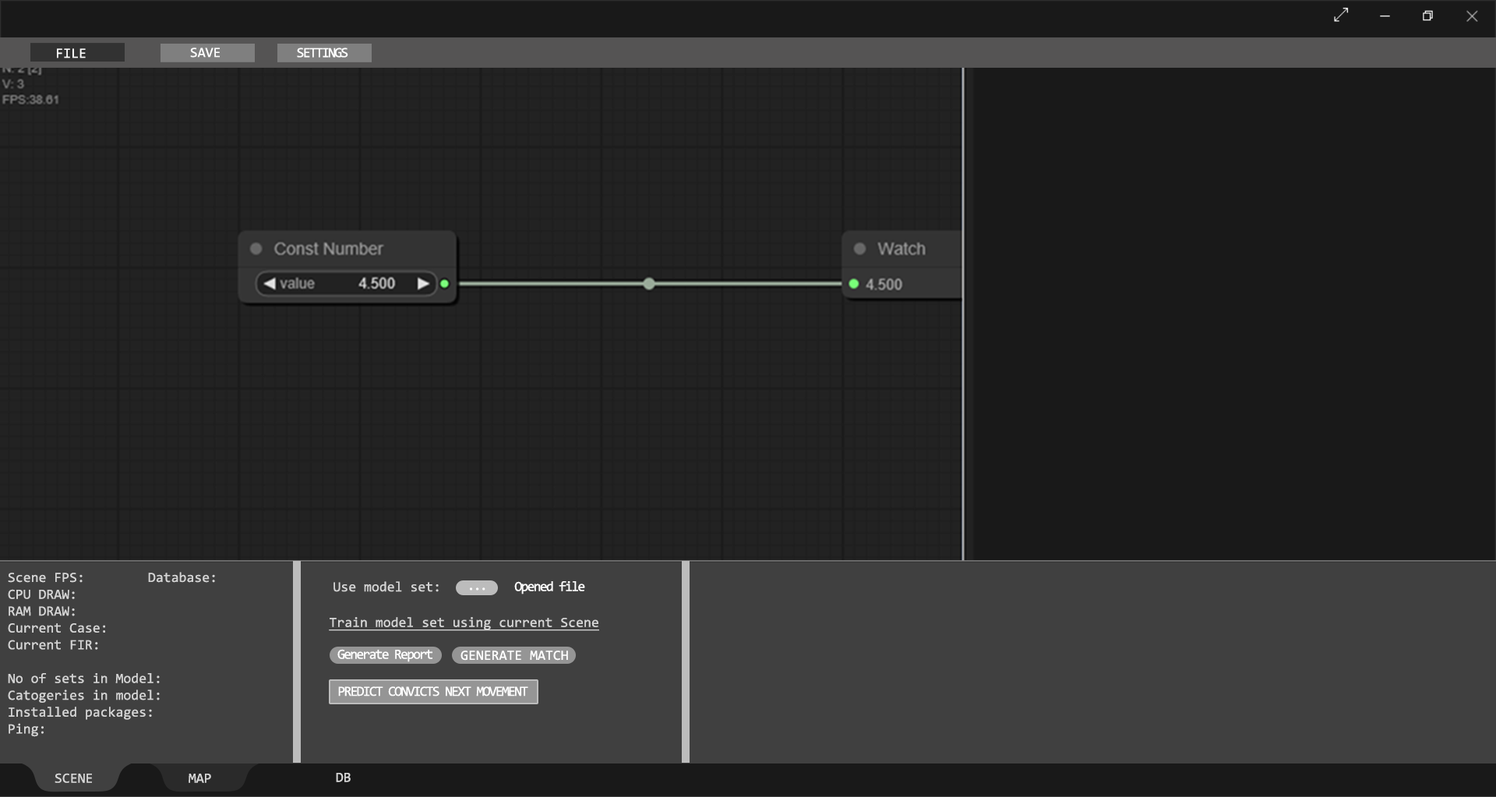
<style>
.page{position:relative;width:1496px;height:797px;background:#191919}
.page>*{position:absolute;margin:0}
.t1{font:14px "Consolas";color:#ffffff}
.t2{font:14px "Consolas";letter-spacing:-0.1em;color:#ffffff}
.t3{font:14px "Consolas";color:#d5d5d5}
.t4{font:14px "Consolas";color:#d5d5d5;text-decoration:underline}
.t5{font:14px "Consolas";color:#d7d7d7}
</style>
<div class="page">
<p class="t1" style="left:57px;top:48px;width:29px;height:10px">FILE</p>
<p class="t1" style="left:190px;top:48px;width:30px;height:10px">SAVE</p>
<p class="t2" style="left:297px;top:48px;width:51px;height:10px">SETTINGS</p>
<p class="t3" style="left:8px;top:572px;width:207px;height:165px">Scene FPS:   Database:<br>CPU DRAW:      <br>RAM DRAW:   <br>Current Case:<br>Current FIR:<br><br>No of sets in Model:<br>Catogeries in model:<br>Installed packages:<br>Ping:</p>
<p class="t3" style="left:333px;top:581px;width:106px;height:11px">Use model set:</p>
<p class="t2" style="left:514px;top:581px;width:71px;height:14px">Opened file</p>
<p class="t2" style="left:470px;top:587px;width:15px;height:4px">...</p>
<p class="t4" style="left:329px;top:617px;width:270px;height:14px">Train model set using current Scene</p>
<p class="t2" style="left:337px;top:649px;width:95px;height:13px">Generate Report</p>
<p class="t1" style="left:460px;top:651px;width:108px;height:10px">GENERATE MATCH</p>
<p class="t2" style="left:338px;top:686px;width:190px;height:11px">PREDICT CONVICTS NEXT MOVEMENT</p>
<p class="t5" style="left:55px;top:773px;width:37px;height:10px">SCENE</p>
<p class="t5" style="left:189px;top:774px;width:22px;height:9px">MAP</p>
<p class="t5" style="left:336px;top:773px;width:15px;height:9px">DB</p>
</div>
